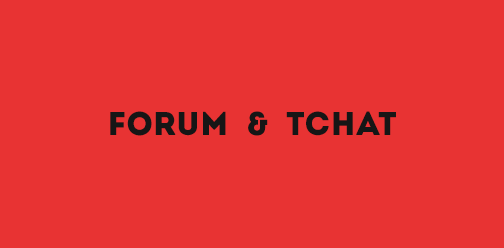
<style>
.page{position:relative;width:504px;height:248px;background:#e83333}
.page>*{position:absolute;margin:0}
.t1{font:33px "Intro";color:#161616;font-variant:small-caps}
</style>
<div class="page">
<p class="t1" style="left:110px;top:111px;width:286px;height:25px">FORUM  &amp;  TCHAT</p>
</div>
